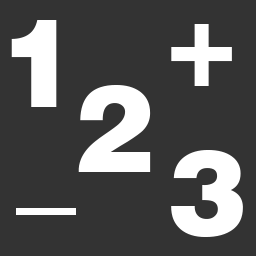
<style>
.page{position:relative;width:256px;height:256px;background:#333333}
.page>*{position:absolute;margin:0}
.t1{font:120px "HelveticaBlack";color:#ffffff}
</style>
<div class="page">
<p class="t1" style="left:11px;top:20px;width:46px;height:87px">1</p>
<p class="t1" style="left:171px;top:24px;width:61px;height:62px">+</p>
<p class="t1" style="left:78px;top:85px;width:73px;height:87px">2</p>
<p class="t1" style="left:171px;top:150px;width:72px;height:87px">3</p>
</div>
